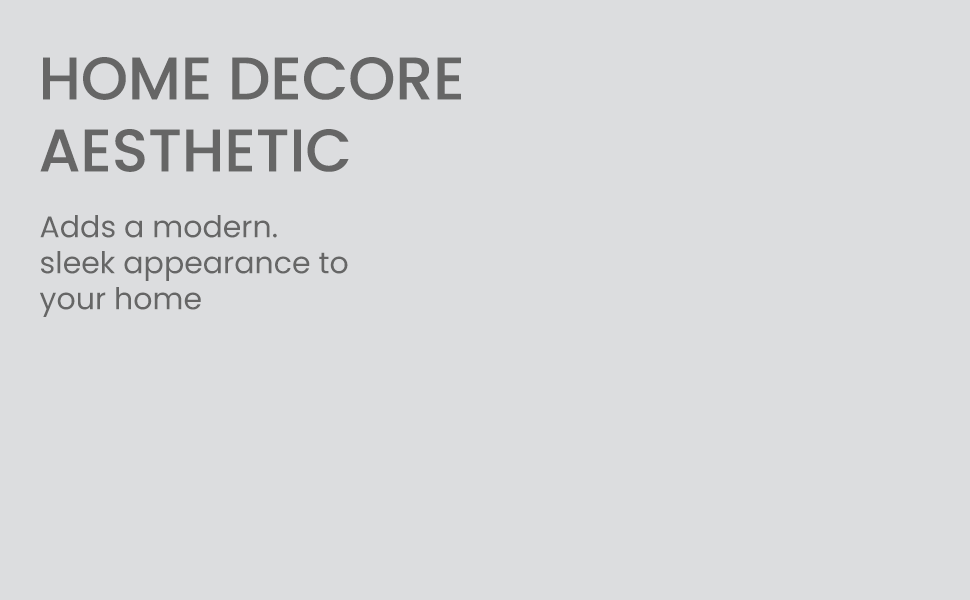
<style>
.page{position:relative;width:970px;height:600px;background:#dcdddf}
.page>*{position:absolute;margin:0}
.t1{font:60px "Poppins-Medium";color:#666666}
.t2{font:30px "Poppins-Regular";color:#666666}
</style>
<div class="page">
<p class="t1" style="left:40px;top:57px;width:421px;height:115px">HOME DECORE<br>AESTHETIC</p>
<p class="t2" style="left:40px;top:215px;width:308px;height:102px">Adds a modern. <br>sleek appearance to<br>your home</p>
</div>
